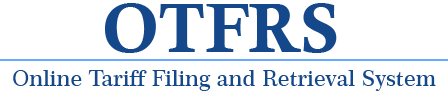
<style>
.page{position:relative;width:448px;height:97px;background:#ffffff}
.page>*{position:absolute;margin:0}
.t1{font:70px "CalisMTBol";color:#15488a}
.t2{font:22px "Century751BT-SemiBold";color:#15488a}
</style>
<div class="page">
<p class="t1" style="left:105px;top:3px;width:232px;height:50px">OTFRS</p>
<p class="t2" style="left:13px;top:70px;width:423px;height:21px">Online Tariff Filing and Retrieval System</p>
</div>
